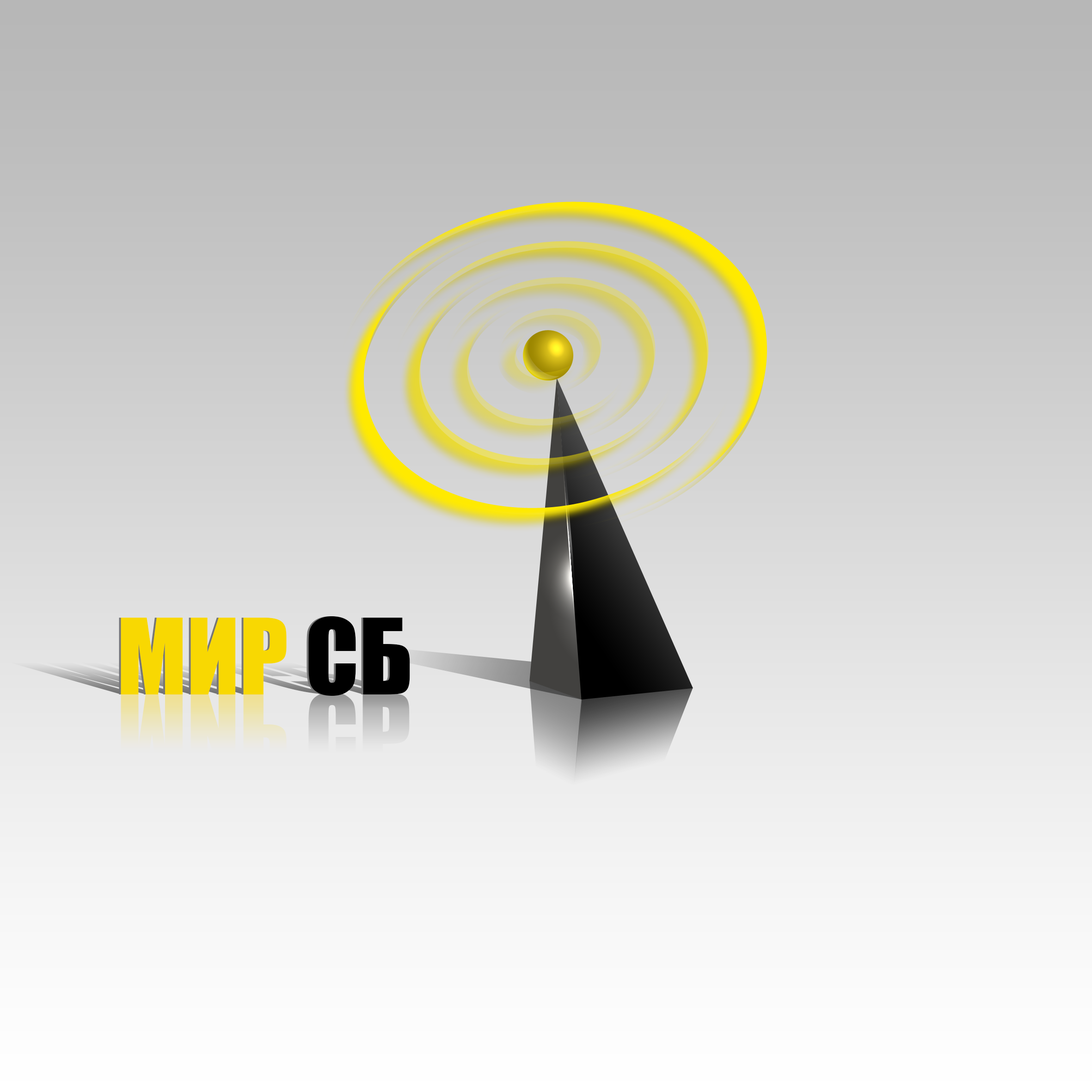
<style>
.page{position:relative;width:1092px;height:1092px}
.page>*{position:absolute;margin:0}
.t1{font:97.3px "Impact"}
.t2{font:97.3px "Impact";color:#f8d802}
.t3{font:97.3px "Impact";color:#000000}
</style>
<div class="page">
<p class="t1" style="left:119px;top:616px;width:289px;height:80px">МИР СБ</p>
<p class="t2" style="left:121px;top:616px;width:289px;height:80px">МИР <span class="t3">СБ</span></p>
<p class="t1" style="left:121px;top:693px;width:166px;height:77px">МИР</p>
</div>
